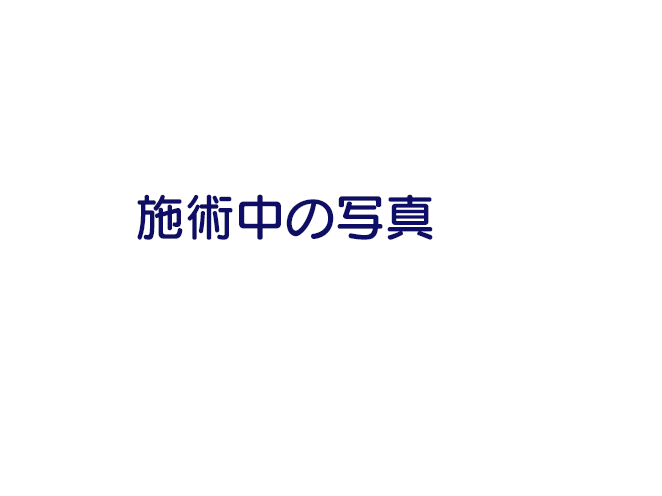
<style>
.page{position:relative;width:662px;height:496px;background:#ffffff}
.page>*{position:absolute;margin:0}
.t1{font:50px "SeuratProN-DB";color:#0f0e66}
</style>
<div class="page">
<p class="t1" style="left:137px;top:194px;width:296px;height:46px">施術中の写真</p>
</div>
